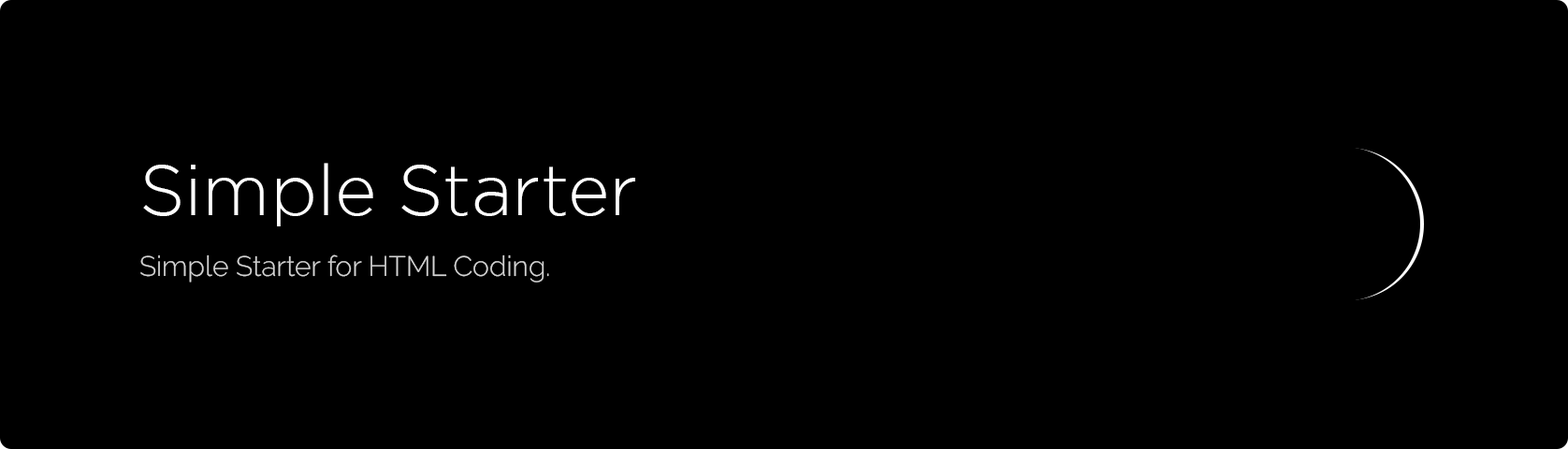
<style>
.page{position:relative;width:1568px;height:449px;background:#000000}
.page>*{position:absolute;margin:0}
.t1{font:71.1px "GothamPro-Light";color:#ffffff}
.t2{font:28.1px "Raleway-Light";color:#d4d4d4}
</style>
<div class="page">
<p class="t1" style="left:143px;top:163px;width:492px;height:63px">Simple Starter</p>
<p class="t2" style="left:140px;top:254px;width:409px;height:29px">Simple Starter for HTML Coding.</p>
</div>
